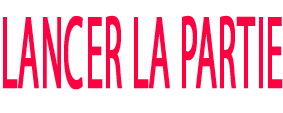
<style>
.page{position:relative;width:283px;height:113px;background:#ffffff}
.page>*{position:absolute;margin:0}
.t1{font:104px "MyriadPro-Regular";color:#ff0041;font-weight:bold;scale:0.33 1}
</style>
<div class="page">
<p class="t1" style="left:3px;top:15px;width:280px;height:75px">LANCER LA PARTIE</p>
</div>
